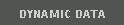
<style>
.page{position:relative;width:124px;height:25px;background:#505551}
.page>*{position:absolute;margin:0}
.t1{font:10.8px "LucidaSans-Demi";letter-spacing:0.025em;color:#ced0cd;text-transform:uppercase;scale:0.93 1}
</style>
<div class="page">
<p class="t1" style="left:20px;top:10px;width:85px;height:8px">Dynamic data</p>
</div>
